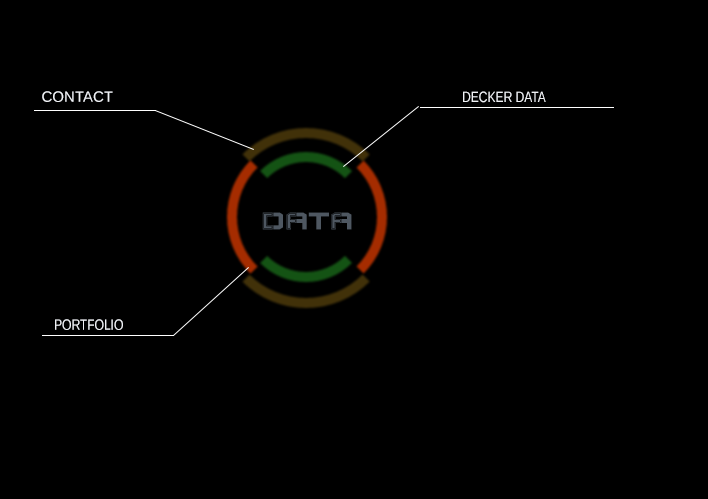
<style>
.page{position:relative;width:708px;height:499px;background:#000000}
.page>*{position:absolute;margin:0}
.t1{font:14.7px "LiberationSansNarrow";color:#eff1f5;scale:1.25 1}
.t2{font:14.7px "LiberationSansNarrow";color:#eff1f5}
</style>
<div class="page">
<p class="t1" style="left:42px;top:91px;width:71px;height:11px">CONTACT</p>
<p class="t2" style="left:463px;top:91px;width:83px;height:12px">DECKER DATA</p>
<p class="t2" style="left:55px;top:319px;width:68px;height:11px">PORTFOLIO</p>
</div>
